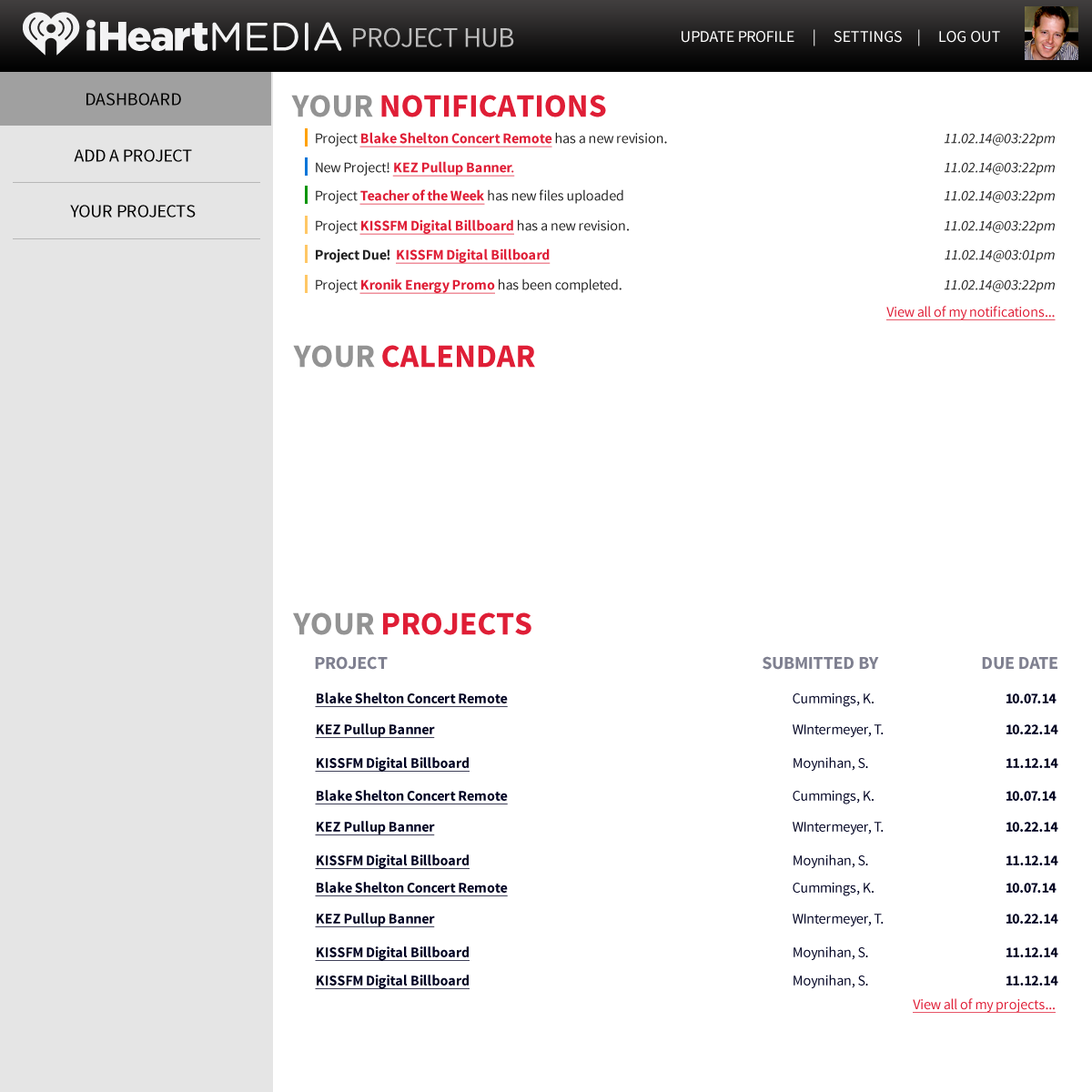
<style>
.page{position:relative;width:1092px;height:1092px;background:#ffffff}
.page>*{position:absolute;margin:0}
.t1{font:28.4px "SourceSansPro-Regular";letter-spacing:-0.005em;color:#bcbbbb}
.t2{font:16.4px "SourceSansPro-Regular";letter-spacing:-0.005em;color:#ffffff}
.t3{font:18.2px "SourceSansPro-Regular";letter-spacing:-0.005em;color:#000000}
.t4{font:32.8px "SourceSansPro-Bold";letter-spacing:-0.005em;color:#df1e36}
.t5{font:32.8px "SourceSansPro-Bold";letter-spacing:-0.005em;color:#939393}
.t6{font:14.6px "SourceSansPro-Bold";letter-spacing:-0.005em;color:#df1e36;text-decoration:underline}
.t7{font:14.6px "SourceSansPro-Regular";letter-spacing:-0.005em;color:#222222}
.t8{font:14.6px "SourceSansPro-It";letter-spacing:-0.005em;color:#222222}
.t9{font:14.6px "SourceSansPro-Regular";letter-spacing:-0.005em;color:#df1e36;text-decoration:underline}
.t10{font:14.6px "SourceSansPro-Bold";letter-spacing:-0.005em;color:#222222}
.t11{font:18.2px "SourceSansPro-Bold";letter-spacing:-0.005em;color:#7f8090}
.t12{font:14.6px "SourceSansPro-Bold";letter-spacing:-0.005em;color:#000222;text-decoration:underline}
.t13{font:14.6px "SourceSansPro-Regular";letter-spacing:-0.005em;color:#000222}
.t14{font:14.6px "SourceSansPro-Bold";letter-spacing:-0.005em;color:#000222}
</style>
<div class="page">
<p class="t1" style="left:353px;top:27px;width:161px;height:20px">PROJECT HUB</p>
<p class="t2" style="left:682px;top:29px;width:318px;height:17px">UPDATE PROFILE     |     SETTINGS    |     LOG OUT</p>
<p class="t3" style="left:86px;top:93px;width:95px;height:13px">DASHBOARD</p>
<p class="t4" style="left:291px;top:95px;width:315px;height:22px"><span class="t5">YOUR</span> NOTIFICATIONS</p>
<p class="t6" style="left:316px;top:132px;width:351px;height:15px"><span class="t7">Project </span>Blake Shelton Concert Remote <span class="t7">has a new revision.</span></p>
<p class="t8" style="left:944px;top:133px;width:111px;height:14px">11.02.14@03:22pm</p>
<p class="t3" style="left:74px;top:149px;width:118px;height:13px">ADD A PROJECT</p>
<p class="t6" style="left:316px;top:161px;width:199px;height:16px"><span class="t7">New Project! </span>KEZ Pullup Banner<span class="t9">.</span></p>
<p class="t8" style="left:944px;top:162px;width:111px;height:14px">11.02.14@03:22pm</p>
<p class="t7" style="left:316px;top:189px;width:307px;height:16px">Project <span class="t6">Teacher of the Week</span> has new files uploaded</p>
<p class="t8" style="left:944px;top:190px;width:111px;height:14px">11.02.14@03:22pm</p>
<p class="t3" style="left:70px;top:205px;width:126px;height:12px">YOUR PROJECTS</p>
<p class="t6" style="left:316px;top:219px;width:313px;height:16px"><span class="t7">Project </span>KISSFM Digital Billboard<span class="t7"> has a new revision.</span></p>
<p class="t8" style="left:944px;top:220px;width:111px;height:14px">11.02.14@03:22pm</p>
<p class="t6" style="left:316px;top:248px;width:235px;height:16px"><span class="t10">Project Due!  </span>KISSFM Digital Billboard</p>
<p class="t8" style="left:945px;top:249px;width:110px;height:14px">11.02.14@03:01pm</p>
<p class="t6" style="left:316px;top:278px;width:306px;height:16px"><span class="t7">Project </span>Kronik Energy Promo<span class="t7"> has been completed.</span></p>
<p class="t8" style="left:944px;top:279px;width:111px;height:14px">11.02.14@03:22pm</p>
<p class="t9" style="left:886px;top:306px;width:170px;height:14px">View all of my notifications...</p>
<p class="t4" style="left:293px;top:345px;width:242px;height:23px"><span class="t5">YOUR</span> CALENDAR</p>
<p class="t4" style="left:293px;top:612px;width:238px;height:23px"><span class="t5">YOUR</span> PROJECTS</p>
<p class="t11" style="left:315px;top:656px;width:73px;height:14px">PROJECT</p>
<p class="t11" style="left:763px;top:656px;width:116px;height:14px">SUBMITTED BY</p>
<p class="t11" style="left:982px;top:657px;width:75px;height:13px">DUE DATE</p>
<p class="t12" style="left:315px;top:693px;width:193px;height:14px">Blake Shelton Concert Remote</p>
<p class="t13" style="left:793px;top:693px;width:81px;height:14px">Cummings, K.</p>
<p class="t14" style="left:1006px;top:693px;width:50px;height:10px">10.07.14</p>
<p class="t12" style="left:315px;top:723px;width:120px;height:15px">KEZ Pullup Banner</p>
<p class="t13" style="left:793px;top:724px;width:91px;height:13px">WIntermeyer, T.</p>
<p class="t14" style="left:1006px;top:724px;width:52px;height:10px">10.22.14</p>
<p class="t12" style="left:315px;top:757px;width:155px;height:15px">KISSFM Digital Billboard</p>
<p class="t13" style="left:794px;top:757px;width:74px;height:14px">Moynihan, S.</p>
<p class="t14" style="left:1006px;top:758px;width:52px;height:10px">11.12.14</p>
<p class="t12" style="left:315px;top:790px;width:193px;height:14px">Blake Shelton Concert Remote</p>
<p class="t13" style="left:793px;top:790px;width:81px;height:14px">Cummings, K.</p>
<p class="t14" style="left:1006px;top:791px;width:50px;height:10px">10.07.14</p>
<p class="t12" style="left:315px;top:821px;width:120px;height:14px">KEZ Pullup Banner</p>
<p class="t13" style="left:793px;top:822px;width:91px;height:12px">WIntermeyer, T.</p>
<p class="t14" style="left:1006px;top:822px;width:52px;height:10px">10.22.14</p>
<p class="t12" style="left:315px;top:854px;width:155px;height:15px">KISSFM Digital Billboard</p>
<p class="t13" style="left:794px;top:854px;width:74px;height:14px">Moynihan, S.</p>
<p class="t14" style="left:1006px;top:855px;width:52px;height:10px">11.12.14</p>
<p class="t12" style="left:315px;top:882px;width:193px;height:14px">Blake Shelton Concert Remote</p>
<p class="t13" style="left:793px;top:882px;width:81px;height:14px">Cummings, K.</p>
<p class="t14" style="left:1006px;top:883px;width:50px;height:10px">10.07.14</p>
<p class="t12" style="left:315px;top:913px;width:120px;height:14px">KEZ Pullup Banner</p>
<p class="t13" style="left:793px;top:914px;width:91px;height:12px">WIntermeyer, T.</p>
<p class="t14" style="left:1006px;top:914px;width:52px;height:10px">10.22.14</p>
<p class="t12" style="left:315px;top:946px;width:155px;height:15px">KISSFM Digital Billboard</p>
<p class="t13" style="left:794px;top:946px;width:74px;height:14px">Moynihan, S.</p>
<p class="t14" style="left:1006px;top:947px;width:52px;height:10px">11.12.14</p>
<p class="t12" style="left:315px;top:975px;width:155px;height:14px">KISSFM Digital Billboard</p>
<p class="t13" style="left:794px;top:975px;width:74px;height:13px">Moynihan, S.</p>
<p class="t14" style="left:1006px;top:976px;width:52px;height:10px">11.12.14</p>
<p class="t9" style="left:913px;top:998px;width:143px;height:15px">View all of my projects...</p>
</div>
